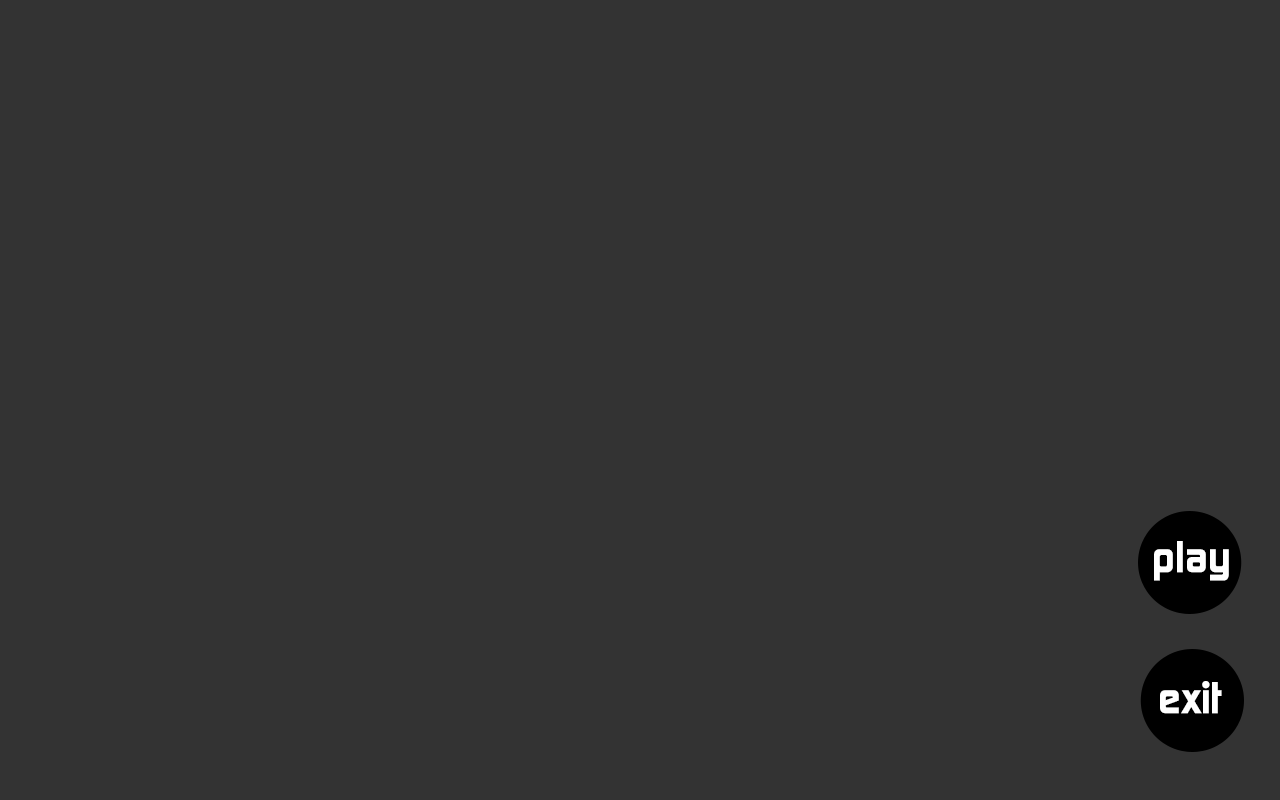
<style>
.page{position:relative;width:1280px;height:800px;background:#333333}
.page>*{position:absolute;margin:0}
.t1{font:42.9px "ContinuumBold";color:#ffffff}
</style>
<div class="page">
<p class="t1" style="left:1154px;top:541px;width:75px;height:40px">play</p>
<p class="t1" style="left:1160px;top:681px;width:62px;height:33px">exit</p>
</div>
